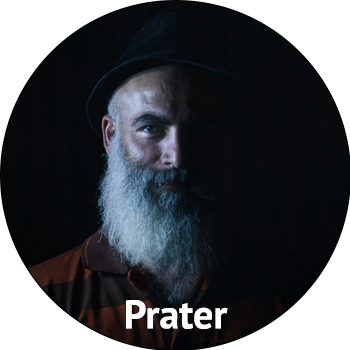
<style>
.page{position:relative;width:350px;height:350px;background:#ffffff}
.page>*{position:absolute;margin:0}
.t1{font:40px "PTSans-Bold";color:#ffffff}
</style>
<div class="page">
<p class="t1" style="left:126px;top:300px;width:102px;height:29px">Prater</p>
</div>
